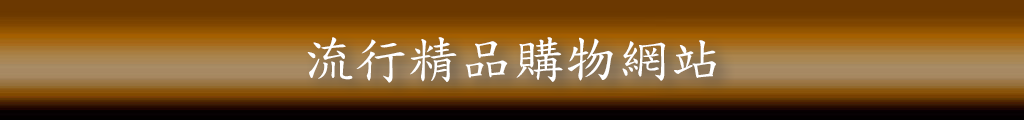
<style>
.page{position:relative;width:1024px;height:120px}
.page>*{position:absolute;margin:0}
.t1{font:52px "DFKaiShu-SB-Estd-BF";letter-spacing:0.01em;color:#ffffff}
</style>
<div class="page">
<p class="t1" style="left:307px;top:37px;width:409px;height:46px">流行精品購物網站</p>
</div>
